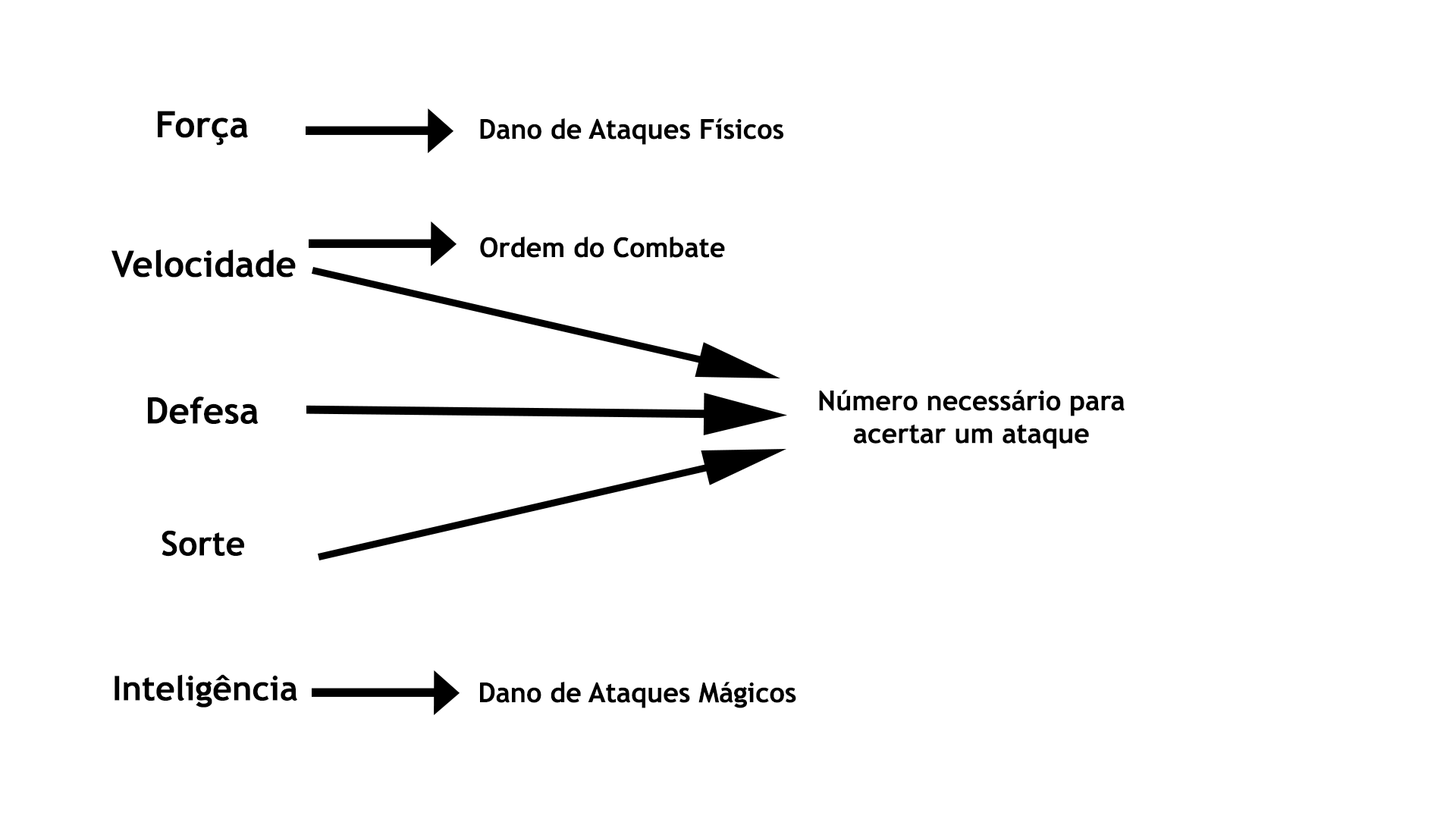
<style>
.page{position:relative;width:1456px;height:819px;background:#ffffff}
.page>*{position:absolute;margin:0}
.t1{font:36.4px "TrebuchetMS-Bold";color:#000000}
.t2{font:27.3px "TrebuchetMS-Bold";color:#000000}
.t3{font:34.1px "TrebuchetMS-Bold";color:#000000}
</style>
<div class="page">
<p class="t1" style="left:158px;top:111px;width:90px;height:35px">Força</p>
<p class="t2" style="left:480px;top:118px;width:303px;height:27px">Dano de Ataques Físicos</p>
<p class="t2" style="left:480px;top:237px;width:245px;height:21px">Ordem do Combate</p>
<p class="t1" style="left:111px;top:249px;width:185px;height:29px">Velocidade</p>
<p class="t2" style="left:819px;top:390px;width:306px;height:59px">Número necessário para <br>  acertar um ataque</p>
<p class="t1" style="left:148px;top:397px;width:111px;height:27px">Defesa</p>
<p class="t3" style="left:162px;top:530px;width:82px;height:27px">Sorte</p>
<p class="t3" style="left:115px;top:674px;width:182px;height:34px">Inteligência</p>
<p class="t2" style="left:480px;top:682px;width:316px;height:26px">Dano de Ataques Mágicos</p>
</div>
